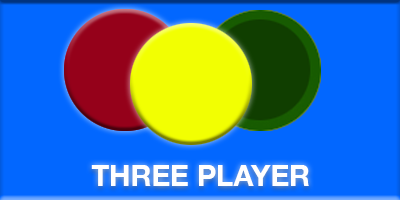
<style>
.page{position:relative;width:400px;height:200px;background:#0267ff}
.page>*{position:absolute;margin:0}
.t1{font:28.9px "HelveticaNeue-Bold";color:#ffffff}
</style>
<div class="page">
<p class="t1" style="left:91px;top:165px;width:218px;height:21px">THREE PLAYER</p>
</div>
